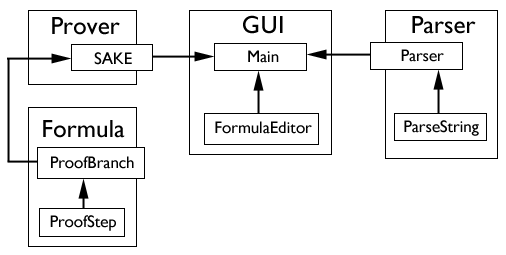
<style>
.page{position:relative;width:506px;height:255px;background:#ffffff}
.page>*{position:absolute;margin:0}
.t1{font:25px "GillSans";color:#000000}
.t2{font:16.7px "GillSans";color:#000000}
</style>
<div class="page">
<p class="t1" style="left:52px;top:17px;width:68px;height:18px">Prover</p>
<p class="t1" style="left:243px;top:15px;width:40px;height:19px">GUI</p>
<p class="t1" style="left:412px;top:16px;width:64px;height:18px">Parser</p>
<p class="t2" style="left:94px;top:52px;width:38px;height:13px">SAKE</p>
<p class="t2" style="left:248px;top:50px;width:31px;height:13px">Main</p>
<p class="t2" style="left:401px;top:49px;width:43px;height:13px">Parser</p>
<p class="t1" style="left:43px;top:120px;width:82px;height:18px">Formula</p>
<p class="t2" style="left:215px;top:121px;width:97px;height:13px">FormulaEditor</p>
<p class="t2" style="left:404px;top:120px;width:75px;height:16px">ParseString</p>
<p class="t2" style="left:51px;top:156px;width:83px;height:13px">ProofBranch</p>
<p class="t2" style="left:50px;top:215px;width:66px;height:16px">ProofStep</p>
</div>
